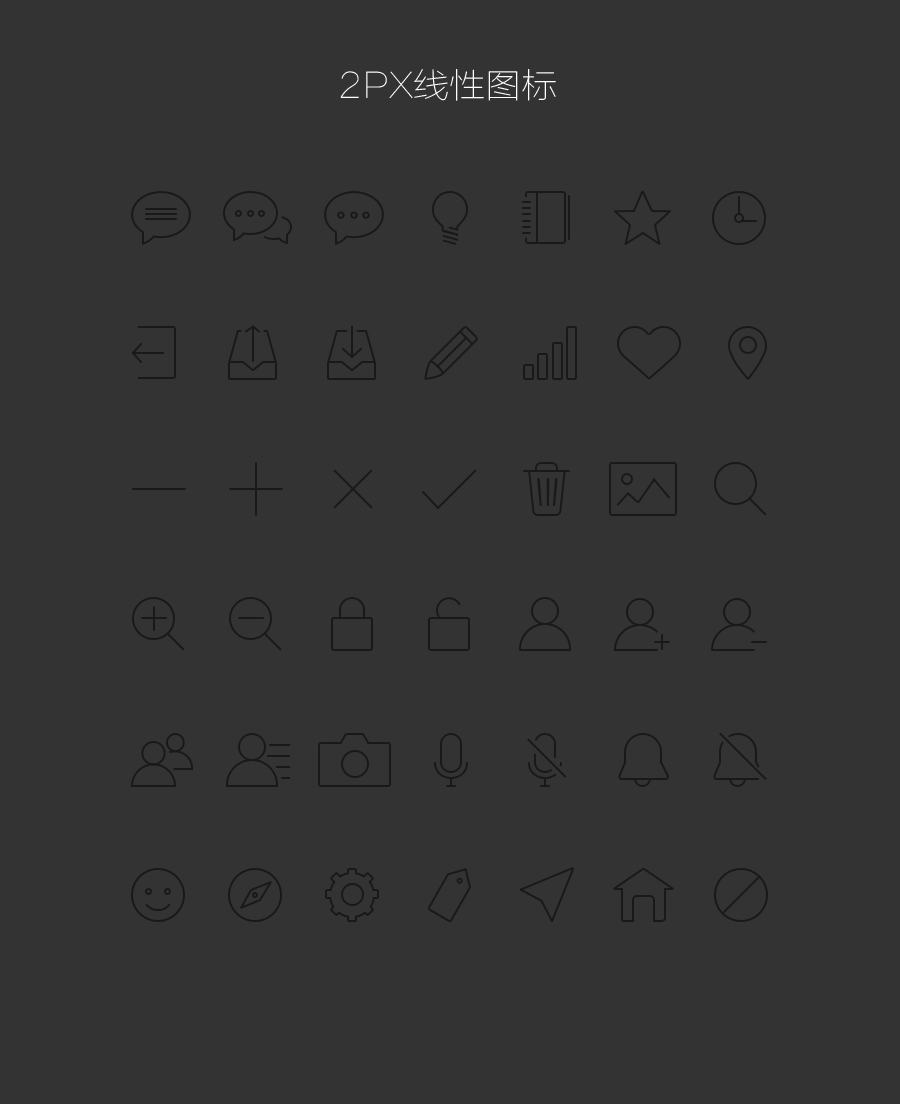
<style>
.page{position:relative;width:900px;height:1104px;background:#333333}
.page>*{position:absolute;margin:0}
.t1{font:34.2px "FZLTCXHJW--GB1-0";color:#ffffff;scale:1.05 1}
</style>
<div class="page">
<p class="t1" style="left:340px;top:69px;width:216px;height:32px">2PX线性图标</p>
</div>
